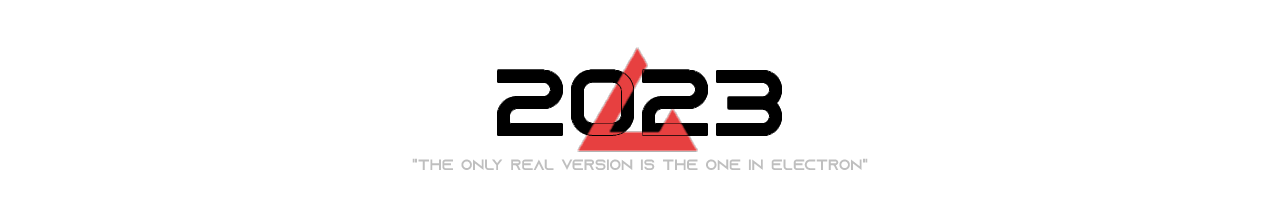
<style>
.page{position:relative;width:1280px;height:201px;background:#ffffff}
.page>*{position:absolute;margin:0}
.t1{font:92.5px "AzonixRegular";color:#000000}
.t2{font:15px "AzonixRegular";color:#bfbfbf}
</style>
<div class="page">
<p class="t1" style="left:497px;top:70px;width:285px;height:66px">2023</p>
<p class="t2" style="left:412px;top:158px;width:456px;height:13px">"the only real version is the one in electron"</p>
</div>
